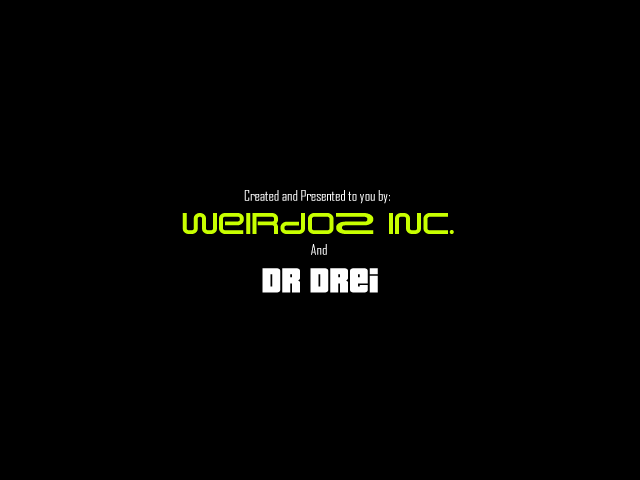
<style>
.page{position:relative;width:640px;height:480px;background:#000000}
.page>*{position:absolute;margin:0}
.t1{font:14px "AgencyFB-Reg";color:#ffffff}
.t2{font:36px "WeirdoZ";color:#c8ff00}
.t3{font:48px "Pricedown";color:#ffffff}
</style>
<div class="page">
<p class="t1" style="left:244px;top:190px;width:146px;height:14px">Created and Presented to you by:</p>
<p class="t2" style="left:182px;top:213px;width:272px;height:21px">WeirdoZ Inc.</p>
<p class="t1" style="left:311px;top:244px;width:16px;height:11px">And</p>
<p class="t3" style="left:262px;top:268px;width:116px;height:25px">Dr Drei</p>
</div>
